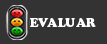
<style>
.page{position:relative;width:107px;height:44px;background:#333333}
.page>*{position:absolute;margin:0}
.t1{font:12px "CooperBlackStd";color:#ffffff}
</style>
<div class="page">
<p class="t1" style="left:30px;top:18px;width:66px;height:9px">EVALUAR</p>
</div>
